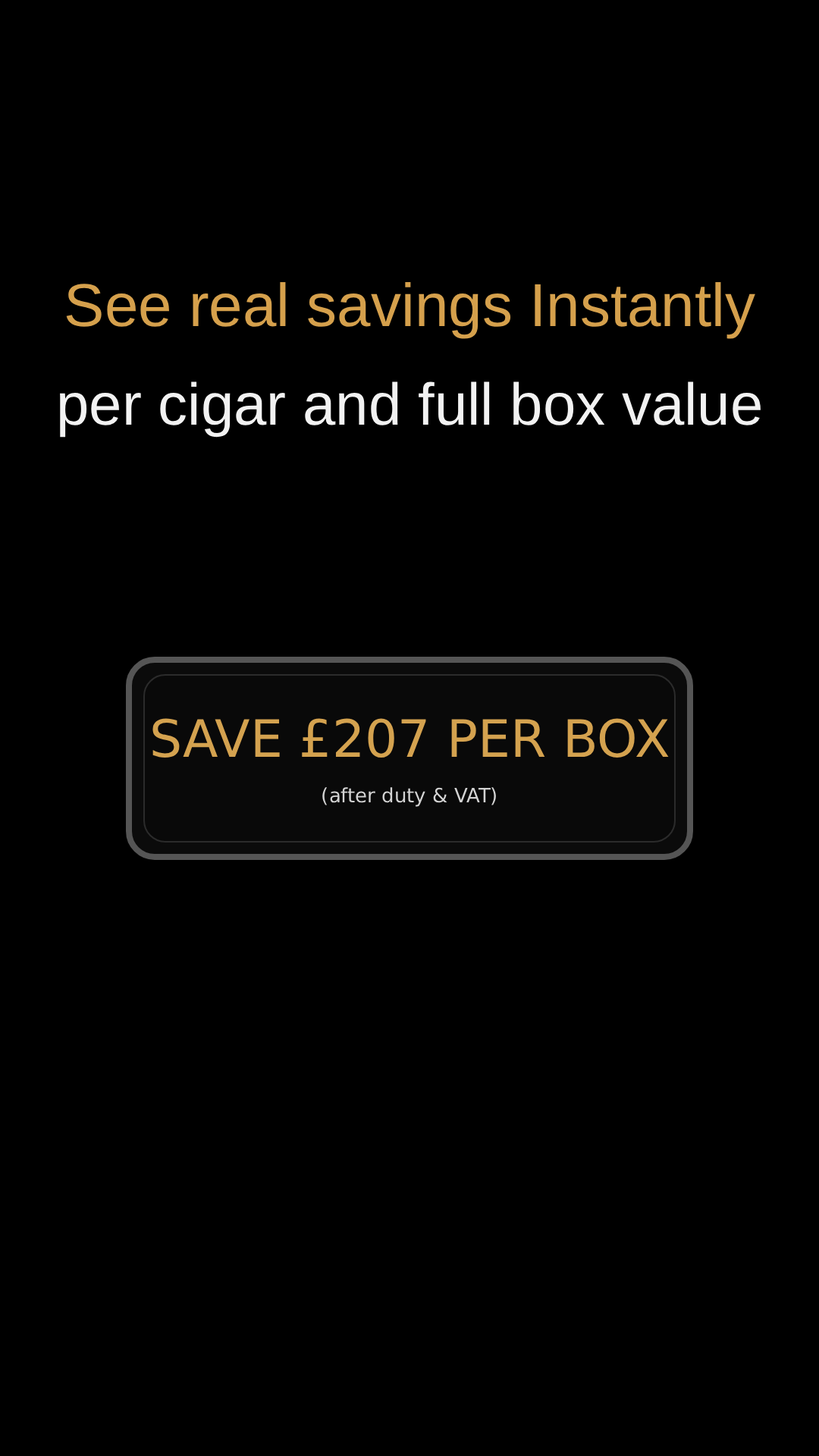
<style>
.page{position:relative;width:819px;height:1456px;background:#000000}
.page>*{position:absolute;margin:0}
.t1{font:60.7px "Helvetica";color:#d5a04c}
.t2{font:59.1px "Helvetica";color:#f2f2f2}
</style>
<div class="page">
<p class="t1" style="left:66px;top:282px;width:689px;height:57px">See real savings Instantly</p>
<p class="t2" style="left:60px;top:381px;width:701px;height:57px">per cigar and full box value</p>
</div>
